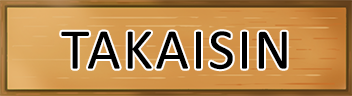
<style>
.page{position:relative;width:352px;height:96px}
.page>*{position:absolute;margin:0}
.t1{font:58px "Calibri";letter-spacing:0.04em;color:#000000}
</style>
<div class="page">
<p class="t1" style="left:61px;top:31px;width:226px;height:39px">TAKAISIN</p>
</div>
